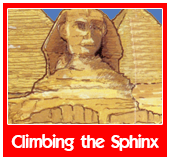
<style>
.page{position:relative;width:170px;height:160px;background:#ff0000}
.page>*{position:absolute;margin:0}
.t1{font:18px "ELEGANCE";color:#ffffff}
</style>
<div class="page">
<p class="t1" style="left:11px;top:134px;width:148px;height:17px">Climbing the Sphinx</p>
</div>
